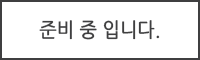
<style>
.page{position:relative;width:200px;height:60px;background:#ffffff}
.page>*{position:absolute;margin:0}
.t1{font:20px "NanumGothic";color:#3f3f40;font-weight:bold;scale:0.9 1}
</style>
<div class="page">
<p class="t1" style="left:39px;top:20px;width:121px;height:20px">준비 중 입니다.</p>
</div>
